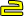
<style>
.page{position:relative;width:24px;height:16px;background:#fcff00}
.page>*{position:absolute;margin:0}
.t1{font:25px "ThundergodII";color:#fcff00}
</style>
<div class="page">
<p class="t1" style="left:1px;top:1px;width:22px;height:14px">2</p>
</div>
